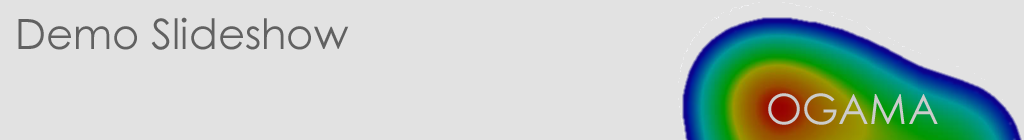
<style>
.page{position:relative;width:1024px;height:140px;background:#e2e2e2}
.page>*{position:absolute;margin:0}
.t1{font:41.7px "CenturyGothic";color:#616161}
.t2{font:41.7px "CenturyGothic";color:#cccccc}
</style>
<div class="page">
<p class="t1" style="left:18px;top:17px;width:331px;height:33px">Demo Slideshow</p>
<p class="t2" style="left:768px;top:93px;width:170px;height:32px">OGAMA</p>
</div>
